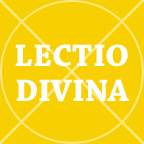
<style>
.page{position:relative;width:144px;height:144px;background:#f8cf01}
.page>*{position:absolute;margin:0}
.t1{font:32.8px/27.8px "ChaparralPro-Bold";color:#ffffff;text-transform:uppercase}
</style>
<div class="page">
<p class="t1" style="left:15px;top:44px;width:114px;height:58px;text-align:center">Lectio<br>Divina</p>
</div>
